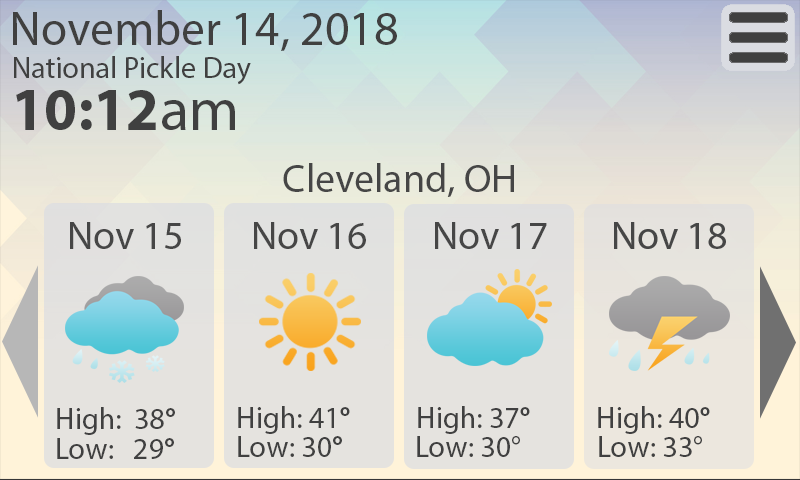
<style>
.page{position:relative;width:800px;height:480px}
.page>*{position:absolute;margin:0}
.t1{font:40px "MyriadPro-Regular";color:#464646}
.t2{font:30px "MyriadPro-Regular";color:#404040}
.t3{font:30px "MyriadPro-Bold";color:#404040}
</style>
<div class="page">
<p class="t1" style="left:283px;top:163px;width:231px;height:34px">Cleveland, OH</p>
<p class="t1" style="left:70px;top:222px;width:111px;height:27px">Nov 15</p>
<p class="t1" style="left:254px;top:222px;width:112px;height:27px">Nov 16</p>
<p class="t1" style="left:435px;top:222px;width:112px;height:27px">Nov 17</p>
<p class="t2" style="left:57px;top:407px;width:118px;height:28px">High:  38<span class="t3">°</span></p>
<p class="t2" style="left:238px;top:406px;width:112px;height:28px">High: 41<span class="t3">°</span></p>
<p class="t2" style="left:418px;top:406px;width:112px;height:28px">High: 37<span class="t3">°</span></p>
<p class="t2" style="left:598px;top:406px;width:112px;height:28px">High: 40<span class="t3">°</span></p>
<p class="t2" style="left:57px;top:438px;width:117px;height:21px">Low:   29<span class="t3">°</span></p>
<p class="t2" style="left:238px;top:436px;width:104px;height:21px">Low: 30<span class="t3">°</span></p>
<p class="t2" style="left:417px;top:436px;width:103px;height:21px">Low: 30°</p>
<p class="t2" style="left:599px;top:436px;width:103px;height:21px">Low: 33°</p>
</div>
